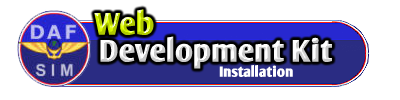
<style>
.page{position:relative;width:400px;height:100px;background:#ffffff}
.page>*{position:absolute;margin:0}
.t1{font:30px "OliJo-Bold"}
.t2{font:14px "OliJo-Bold";color:#ffffff}
</style>
<div class="page">
<p class="t1" style="left:94px;top:9px;width:60px;height:26px">Web</p>
<p class="t1" style="left:100px;top:36px;width:232px;height:33px">Development Kit</p>
<p class="t2" style="left:219px;top:65px;width:74px;height:12px">Installation</p>
</div>
